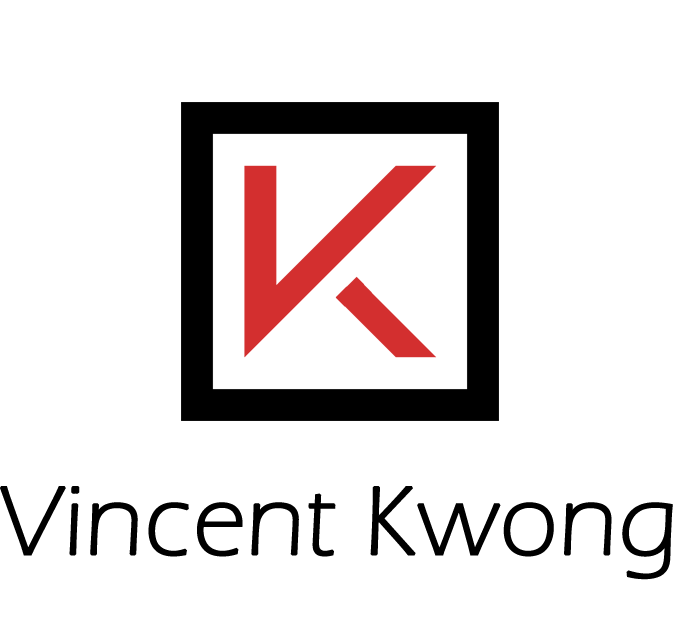
<style>
.page{position:relative;width:673px;height:626px;background:#ffffff}
.page>*{position:absolute;margin:0}
.t1{font:100px "ErasITC-Light";color:#000000;font-weight:bold}
</style>
<div class="page">
<p class="t1" style="left:0px;top:486px;width:673px;height:94px">Vincent Kwong</p>
</div>
